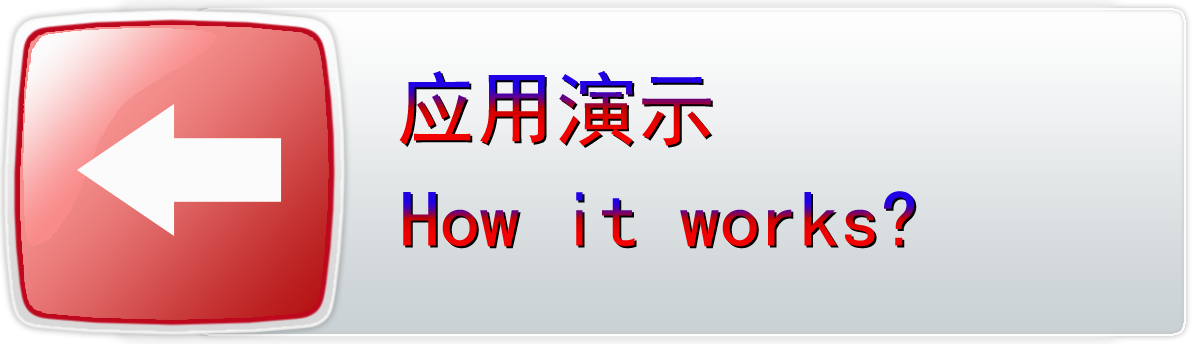
<style>
.page{position:relative;width:1194px;height:344px}
.page>*{position:absolute;margin:0}
.t1{font:80px "SimHei"}
</style>
<div class="page">
<p class="t1" style="left:399px;top:71px;width:312px;height:75px">应用演示</p>
<p class="t1" style="left:403px;top:191px;width:512px;height:56px">How it works?</p>
</div>
